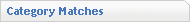
<style>
.page{position:relative;width:190px;height:22px;background:#f9f9f9}
.page>*{position:absolute;margin:0}
.t1{font:11px "TrebuchetMS-Bold";letter-spacing:0.01em;color:#4776bd}
</style>
<div class="page">
<p class="t1" style="left:7px;top:7px;width:96px;height:10px">Category Matches</p>
</div>
